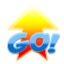
<style>
.page{position:relative;width:64px;height:64px;background:#ffffff}
.page>*{position:absolute;margin:0}
.t1{font:20px "BDCartoonShout"}
</style>
<div class="page">
<p class="t1" style="left:8px;top:32px;width:52px;height:21px">GO!</p>
</div>
